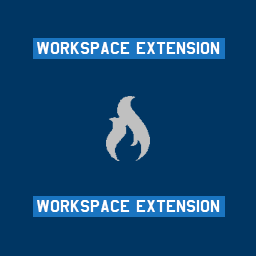
<style>
.page{position:relative;width:256px;height:256px;background:#003663}
.page>*{position:absolute;margin:0}
.t1{font:20px "AmarilloUSAF";color:#ffffff}
</style>
<div class="page">
<p class="t1" style="left:37px;top:42px;width:183px;height:12px">Workspace extension</p>
<p class="t1" style="left:37px;top:200px;width:183px;height:12px">Workspace extension</p>
</div>
